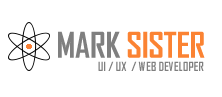
<style>
.page{position:relative;width:222px;height:97px;background:#ffffff}
.page>*{position:absolute;margin:0}
.t1{font:34px "AgencyFB-Bold";letter-spacing:-0.01em;color:#fb8333}
.t2{font:34px "AgencyFB-Bold";letter-spacing:-0.01em;color:#7f7f7f}
.t3{font:12px "AgencyFB-Bold";letter-spacing:-0.01em;color:#7f7f7f}
</style>
<div class="page">
<p class="t1" style="left:58px;top:31px;width:147px;height:27px"><span class="t2">MARK </span>SISTER</p>
<p class="t3" style="left:98px;top:61px;width:106px;height:10px">UI / UX  / WEB DEVELOPER</p>
</div>
